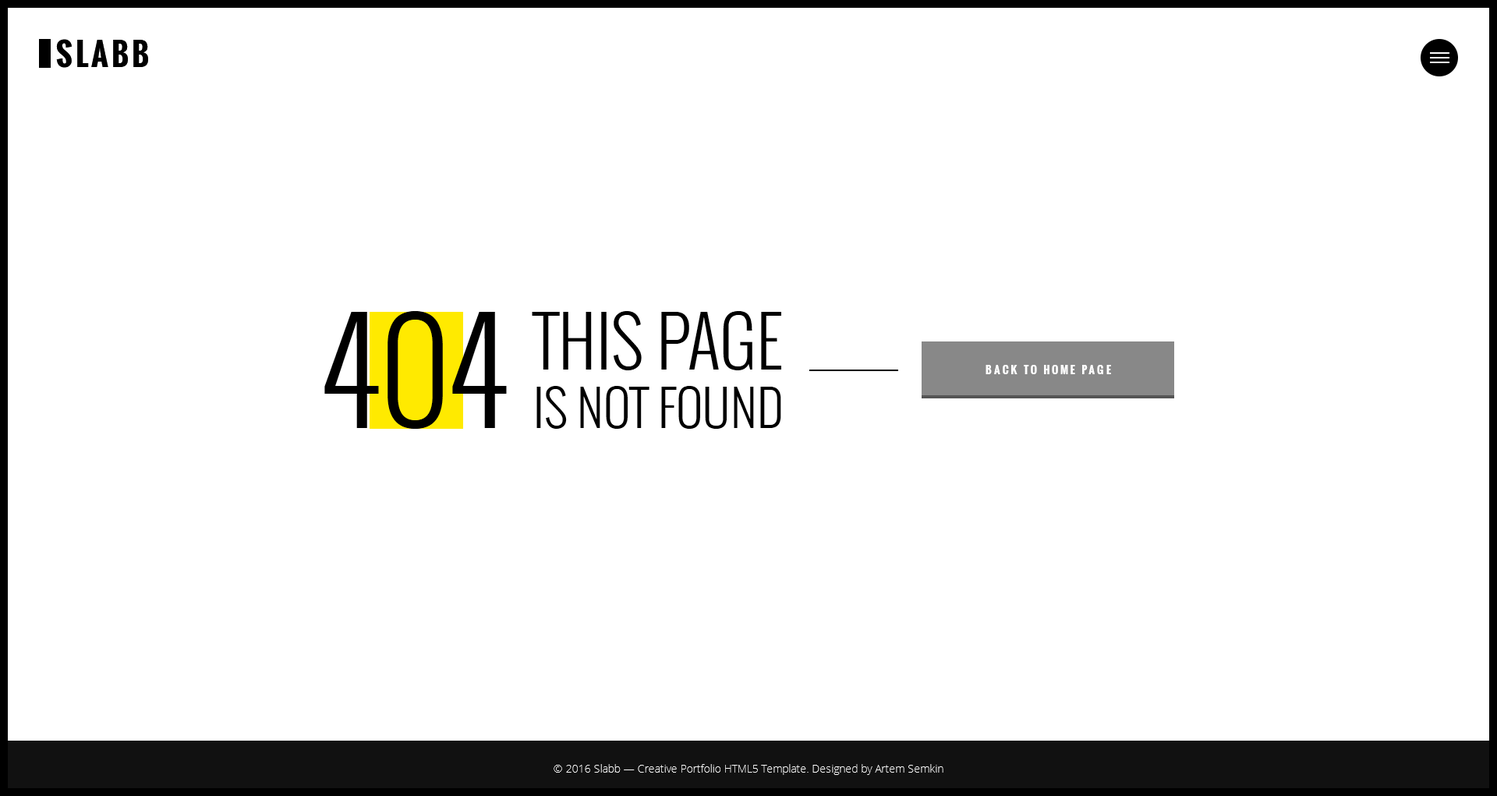
<style>
.page{position:relative;width:1497px;height:796px;background:#ffffff}
.page>*{position:absolute;margin:0}
.t1{font:138px "Oswald-Light";color:#000000;text-transform:uppercase}
.t2{font:68.6px "Oswald-Light";color:#000000;text-transform:uppercase}
.t3{font:10.9px "Oswald-Bold";letter-spacing:0.2em;color:#ffffff;text-transform:uppercase}
.t4{font:49.9px "Oswald-Light";color:#000000;text-transform:uppercase}
</style>
<div class="page">
<p class="t1" style="left:324px;top:311px;width:183px;height:118px">404</p>
<p class="t2" style="left:532px;top:311px;width:249px;height:59px">This page</p>
<p class="t3" style="left:986px;top:365px;width:125px;height:9px">Back to home page</p>
<p class="t4" style="left:537px;top:386px;width:244px;height:43px">Is not found</p>
</div>
